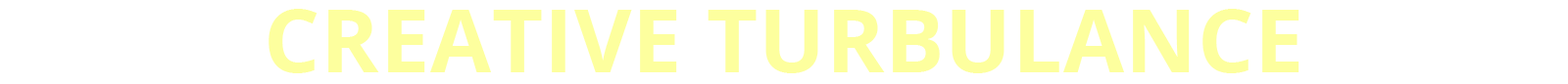
<style>
.page{position:relative;width:1568px;height:84px;background:#ffffff}
.page>*{position:absolute;margin:0}
.t1{font:88.2px "OpenSans-Bold";letter-spacing:0.01em;color:#fdff94;text-transform:uppercase}
</style>
<div class="page">
<p class="t1" style="left:269px;top:9px;width:1030px;height:65px;opacity:0.91">creative turbulance</p>
</div>
